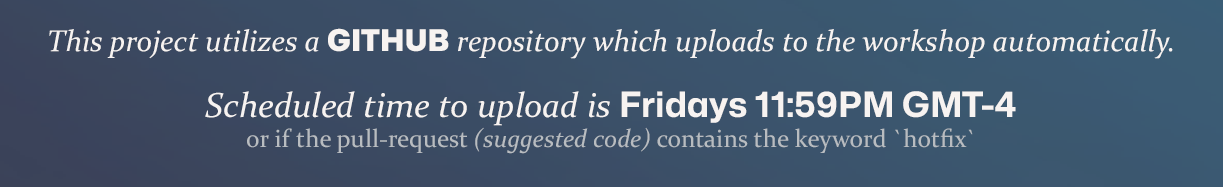
<style>
.page{position:relative;width:1223px;height:187px}
.page>*{position:absolute;margin:0}
.t1{font:30px "Constantia-Italic";color:#f7f3f1}
.t2{font:30px "MonaSans-Black";color:#f7f3f1}
.t3{font:35px "Constantia-Italic";color:#f7f3f1}
.t4{font:35px "MonaSans-Bold";color:#f7f3f1}
.t5{font:25px "Constantia";color:#b8bcc0}
.t6{font:25px "Constantia-Italic";color:#b8bcc0}
</style>
<div class="page">
<p class="t1" style="left:49px;top:28px;width:1124px;height:126px;text-align:center">This project utilizes a <span class="t2">GITHUB</span> repository which uploads to the workshop automatically.<br> <br><span class="t3">Scheduled time to upload is </span><span class="t4">Fridays 11:59PM GMT-4<br></span><span class="t5">or if the pull-request </span><span class="t6">(suggested code)</span><span class="t5"> contains the keyword `hotfix`</span></p>
</div>
